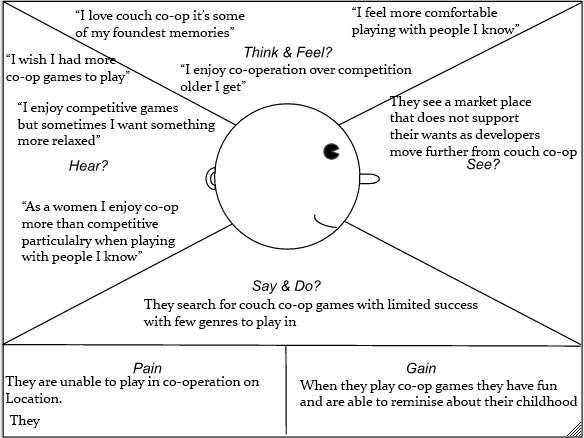
<style>
.page{position:relative;width:584px;height:438px;background:#ffffff}
.page>*{position:absolute;margin:0}
.t1{font:14px "Constantia";color:#000000}
</style>
<div class="page">
<p class="t1" style="left:75px;top:10px;width:170px;height:30px">“I love couch co-op it’s some<br>of my foundest memories”</p>
<p class="t1" style="left:351px;top:7px;width:169px;height:30px">“I feel more comfortable <br>playing with people I know”</p>
<p class="t1" style="left:6px;top:54px;width:124px;height:30px">“I wish I had more <br>co-op games to play”</p>
<p class="t1" style="left:180px;top:64px;width:232px;height:30px">“I enjoy co-operation over competition <br>older I get”</p>
<p class="t1" style="left:17px;top:102px;width:199px;height:43px">“I enjoy competitive games <br>but sometimes I want something<br>more relaxed”</p>
<p class="t1" style="left:389px;top:96px;width:188px;height:63px">They see a market place<br>that does not support<br>their wants as developers <br>move further from couch co-op</p>
<p class="t1" style="left:21px;top:201px;width:158px;height:63px">“As a women I enjoy co-op<br>more than competitive <br>particulalry when playing<br>with people I know”</p>
<p class="t1" style="left:143px;top:299px;width:335px;height:30px">They search for couch co-op games with limited success <br>with few genres to play in</p>
<p class="t1" style="left:5px;top:376px;width:255px;height:27px">They are unable to play in co-operation on<br>Location.</p>
<p class="t1" style="left:299px;top:380px;width:279px;height:26px">When they play co-op games they have fun<br>and are able to reminise about their childhood</p>
<p class="t1" style="left:9px;top:415px;width:31px;height:13px">They</p>
</div>
